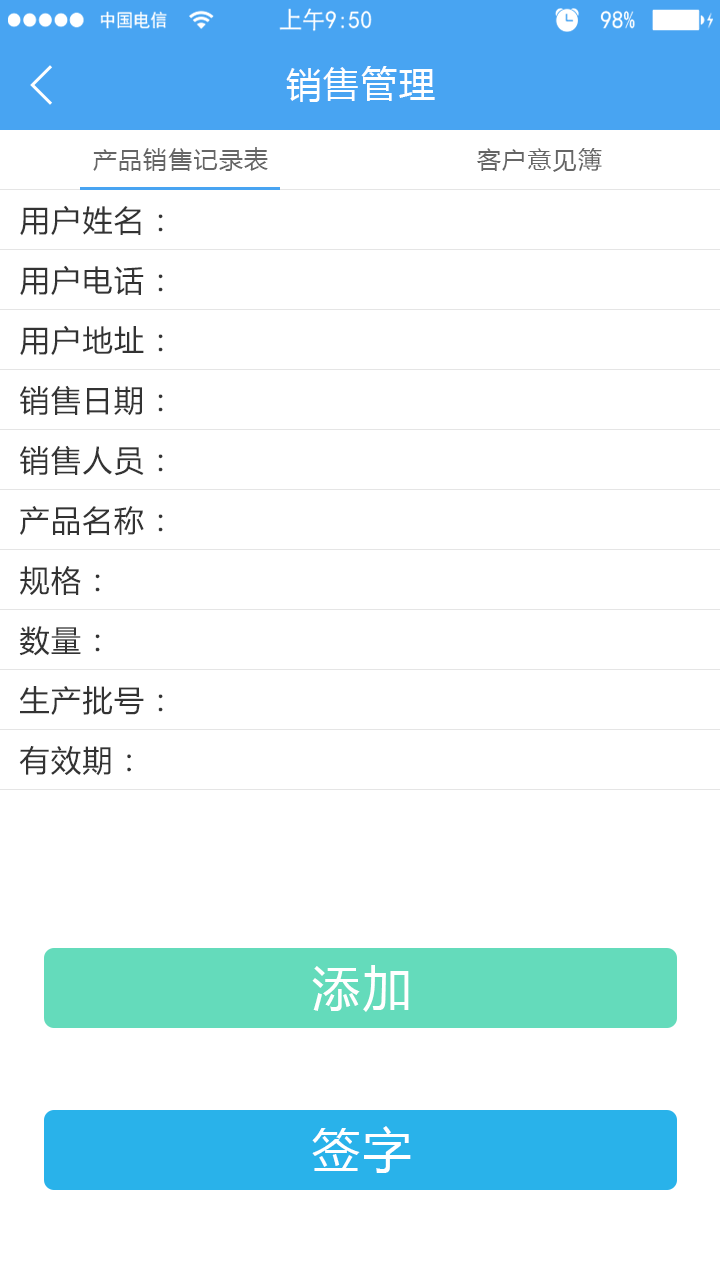
<style>
.page{position:relative;width:720px;height:1280px;background:#ffffff}
.page>*{position:absolute;margin:0}
.t1{font:36px "MicrosoftYaHei";letter-spacing:0.05em;color:#ffffff}
.t2{font:24px "MicrosoftYaHei";letter-spacing:0.05em;color:#666666}
.t3{font:30px "MicrosoftYaHei";letter-spacing:0.05em;color:#333333}
.t4{font:48px "MicrosoftYaHei";letter-spacing:0.05em;color:#ffffff}
</style>
<div class="page">
<p class="t1" style="left:286px;top:66px;width:149px;height:36px">销售管理</p>
<p class="t2" style="left:93px;top:147px;width:175px;height:24px">产品销售记录表</p>
<p class="t2" style="left:477px;top:148px;width:125px;height:24px">客户意见簿</p>
<p class="t3" style="left:20px;top:205px;width:143px;height:31px">用户姓名：</p>
<p class="t3" style="left:20px;top:265px;width:143px;height:31px">用户电话：</p>
<p class="t3" style="left:20px;top:325px;width:143px;height:31px">用户地址：</p>
<p class="t3" style="left:20px;top:385px;width:143px;height:31px">销售日期：</p>
<p class="t3" style="left:20px;top:445px;width:143px;height:31px">销售人员：</p>
<p class="t3" style="left:20px;top:506px;width:143px;height:29px">产品名称：</p>
<p class="t3" style="left:20px;top:566px;width:80px;height:29px">规格：</p>
<p class="t3" style="left:19px;top:626px;width:81px;height:30px">数量：</p>
<p class="t3" style="left:20px;top:686px;width:143px;height:29px">生产批号：</p>
<p class="t3" style="left:19px;top:746px;width:112px;height:30px">有效期：</p>
<p class="t4" style="left:312px;top:965px;width:97px;height:47px">添加</p>
<p class="t4" style="left:312px;top:1126px;width:99px;height:47px">签字</p>
</div>
